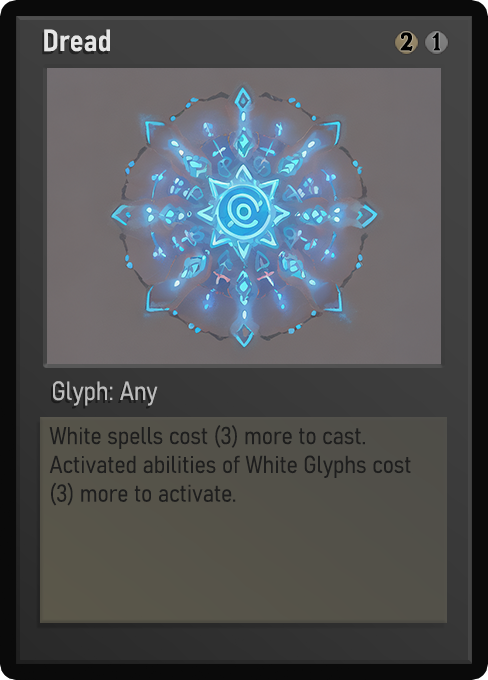
<style>
.page{position:relative;width:488px;height:680px}
.page>*{position:absolute;margin:0}
.t1{font:30px "Bahnschrift-SemiBoldSemiCondensed";color:#f2f2f2;font-weight:bold}
.t2{font:25px "WTRRoycroft";color:#000000;font-weight:bold;scale:1.09 1}
.t3{font:26px "Bahnschrift-LightSemiCondensed";color:#c8c8c8;font-weight:bold}
.t4{font:24px "Bahnschrift-LightSemiCondensed";color:#1e1e1e;font-weight:bold}
</style>
<div class="page">
<p class="t1" style="left:44px;top:29px;width:66px;height:23px;opacity:0.9">Dread</p>
<p class="t2" style="left:400px;top:32px;width:13px;height:19px">2</p>
<p class="t2" style="left:432px;top:32px;width:9px;height:19px">1</p>
<p class="t3" style="left:53px;top:381px;width:105px;height:25px;opacity:0.9">Glyph: Any</p>
<p class="t4" style="left:49px;top:425px;width:362px;height:81px">White spells cost (3) more to cast. Activated abilities of White Glyphs cost (3) more to activate.</p>
</div>
